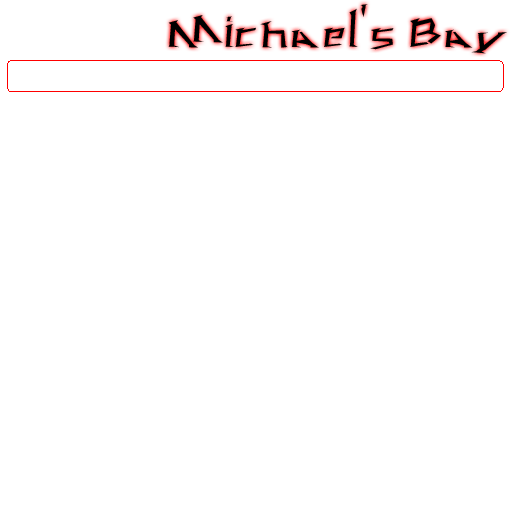
<style>
.page{position:relative;width:512px;height:512px;background:#ffffff}
.page>*{position:absolute;margin:0}
.t1{font:24px "rachalia";color:#000000}
</style>
<div class="page">
<p class="t1" style="left:168px;top:4px;width:339px;height:50px">Michael's Bay</p>
</div>
